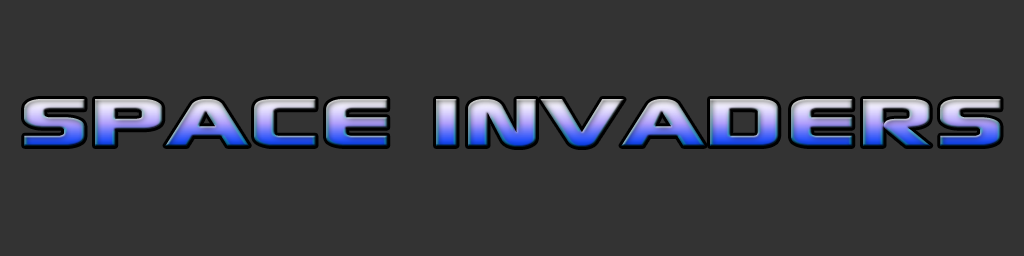
<style>
.page{position:relative;width:1024px;height:256px;background:#333333}
.page>*{position:absolute;margin:0}
.t1{font:130px "Xscale"}
</style>
<div class="page">
<p class="t1" style="left:24px;top:99px;width:977px;height:48px">SPACE INVADERS</p>
</div>
